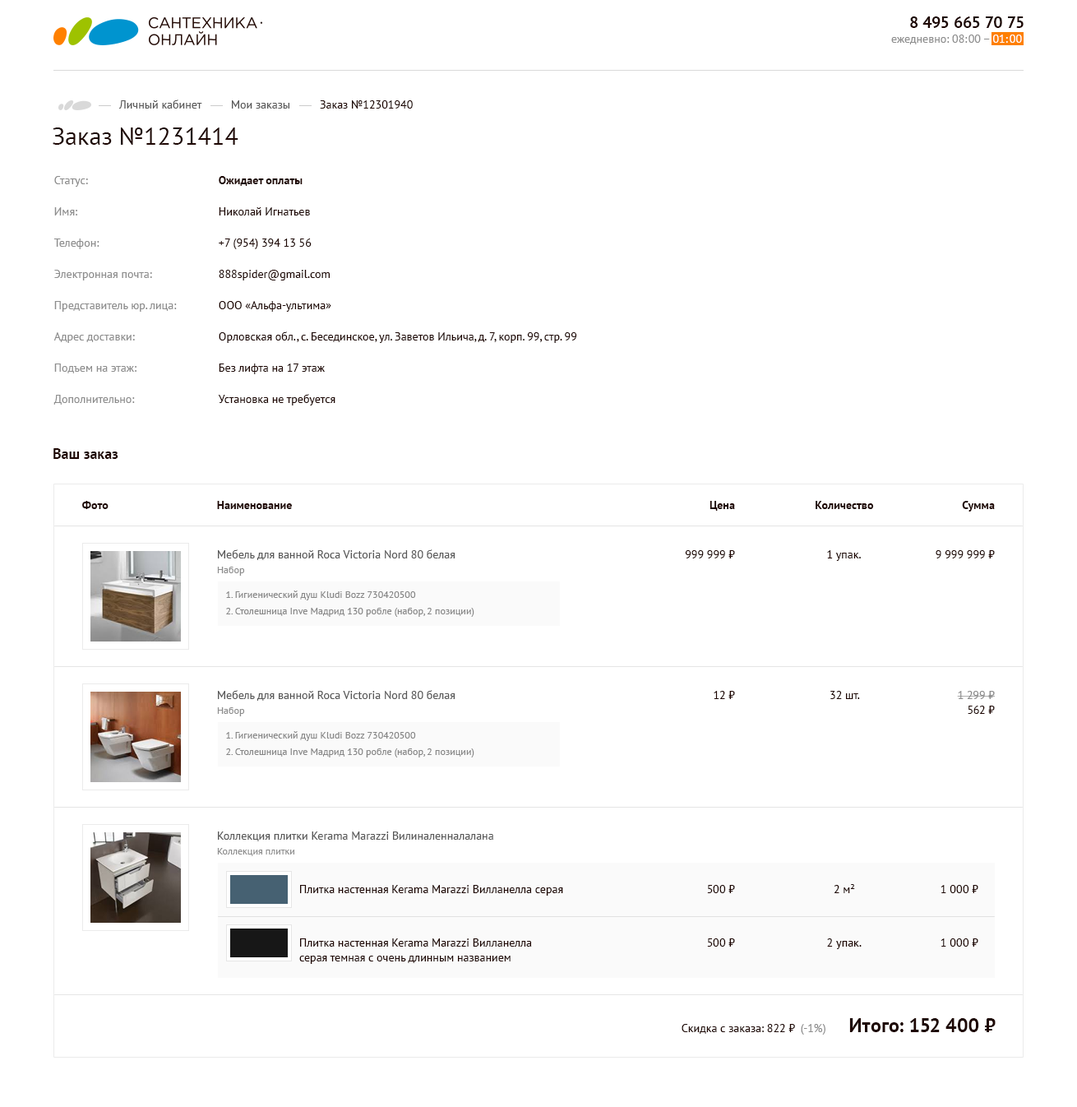
<style>
.page{position:relative;width:1077px;height:1107px;background:#ffffff}
.page>*{position:absolute;margin:0}
.t1{font:16.4px "PTSans-Bold";color:#1e0602}
.t2{font:11.5px "PTSans-Regular";color:#8d8d8d}
.t3{font:11.5px "PTSans-Regular";color:#ffffff}
.t4{font:11.5px "PTSans-Regular";color:#585858}
.t5{font:11.5px "PTSans-Regular";color:#1e0602}
.t6{font:24.7px "PTSans-Regular";color:#1e0602}
.t7{font:11.5px/14.8px "PTSans-Regular";color:#8d8d8d}
.t8{font:11.5px/14.8px "PTSans-Regular";color:#1e0602}
.t9{font:11.5px/14.8px "PTSans-Bold";color:#1e0602}
.t10{font:14.8px "PTSans-Bold";color:#1e0602}
.t11{font:11.5px "PTSans-Bold";color:#1e0602}
.t12{font:9.9px "PTSans-Regular";color:#8d8d8d}
.t13{font:9.9px/13.2px "PTSans-Regular";color:#878787}
.t14{font:19.7px "PTSans-Bold";color:#1e0602}
</style>
<div class="page">
<p class="t1" style="left:910px;top:16px;width:114px;height:12px">8 495 665 70 75</p>
<p class="t2" style="left:891px;top:35px;width:131px;height:9px">ежедневно: 08:00 – <span class="t3">01:00</span></p>
<p class="t4" style="left:118px;top:100px;width:84px;height:9px">Личный кабинет</p>
<p class="t4" style="left:232px;top:100px;width:57px;height:9px">Мои заказы</p>
<p class="t5" style="left:320px;top:100px;width:93px;height:9px">Заказ №12301940</p>
<p class="t6" style="left:53px;top:127px;width:185px;height:18px">Заказ №1231414</p>
<p class="t7" style="left:53px;top:176px;width:124px;height:229px">Статус:<br>Имя:<br>Телефон:<br>Электронная почта:<br>Представитель юр. лица:<br>Адрес доставки:<br>Подъем на этаж:<br>Дополнительно:</p>
<p class="t8" style="left:218px;top:176px;width:359px;height:229px"><span class="t9">Ожидает оплаты<br></span>Николай Игнатьев<br>+7 (954) 394 13 56<br>888spider@gmail.com<br>ООО «Альфа-ультима»<br>Орловская обл., с. Бесединское, ул. Заветов Ильича, д. 7, корп. 99, стр. 99<br>Без лифта на 17 этаж<br>Установка не требуется</p>
<p class="t10" style="left:53px;top:448px;width:65px;height:11px">Ваш заказ</p>
<p class="t11" style="left:82px;top:501px;width:27px;height:8px">Фото</p>
<p class="t11" style="left:217px;top:501px;width:75px;height:8px">Наименование</p>
<p class="t11" style="left:710px;top:501px;width:25px;height:10px">Цена</p>
<p class="t11" style="left:816px;top:501px;width:58px;height:8px">Количество</p>
<p class="t11" style="left:962px;top:501px;width:33px;height:11px">Сумма</p>
<p class="t4" style="left:218px;top:549px;width:238px;height:11px">Мебель для ванной Roca Victoria Nord 80 белая</p>
<p class="t5" style="left:685px;top:550px;width:50px;height:8px">999 999 ₽</p>
<p class="t5" style="left:827px;top:550px;width:34px;height:11px">1 упак.</p>
<p class="t5" style="left:936px;top:550px;width:59px;height:8px">9 999 999 ₽</p>
<p class="t12" style="left:217px;top:567px;width:28px;height:9px">Набор</p>
<p class="t13" style="left:226px;top:590px;width:248px;height:27px">1. Гигиенический душ Kludi Bozz 730420500<br>2. Столешница Inve Мадрид 130 робле (набор, 2 позиции)</p>
<p class="t4" style="left:218px;top:690px;width:238px;height:11px">Мебель для ванной Roca Victoria Nord 80 белая</p>
<p class="t5" style="left:714px;top:691px;width:21px;height:8px">12 ₽</p>
<p class="t5" style="left:831px;top:691px;width:29px;height:8px">32 шт.</p>
<p class="t2" style="left:957px;top:691px;width:38px;height:8px">1 299 ₽</p>
<p class="t12" style="left:217px;top:707px;width:28px;height:9px">Набор</p>
<p class="t5" style="left:968px;top:706px;width:27px;height:8px">562 ₽</p>
<p class="t13" style="left:226px;top:731px;width:248px;height:26px">1. Гигиенический душ Kludi Bozz 730420500<br>2. Столешница Inve Мадрид 130 робле (набор, 2 позиции)</p>
<p class="t4" style="left:218px;top:831px;width:275px;height:10px">Коллекция плитки Kerama Marazzi Вилиналенналалана</p>
<p class="t12" style="left:217px;top:848px;width:77px;height:8px">Коллекция плитки</p>
<p class="t5" style="left:300px;top:885px;width:263px;height:11px">Плитка настенная Kerama Marazzi Вилланелла серая</p>
<p class="t5" style="left:707px;top:885px;width:28px;height:8px">500 ₽</p>
<p class="t5" style="left:834px;top:884px;width:21px;height:9px">2 м²</p>
<p class="t5" style="left:941px;top:885px;width:38px;height:8px">1 000 ₽</p>
<p class="t8" style="left:299px;top:938px;width:233px;height:26px">Плитка настенная Kerama Marazzi Вилланелла<br>серая темная с очень длинным названием</p>
<p class="t5" style="left:707px;top:938px;width:28px;height:9px">500 ₽</p>
<p class="t5" style="left:827px;top:938px;width:35px;height:11px">2 упак.</p>
<p class="t5" style="left:941px;top:938px;width:38px;height:9px">1 000 ₽</p>
<p class="t5" style="left:682px;top:1024px;width:113px;height:10px">Скидка с заказа: 822 ₽</p>
<p class="t2" style="left:801px;top:1024px;width:25px;height:11px">(-1%)</p>
<p class="t14" style="left:849px;top:1018px;width:147px;height:14px">Итого: 152 400 ₽</p>
</div>
